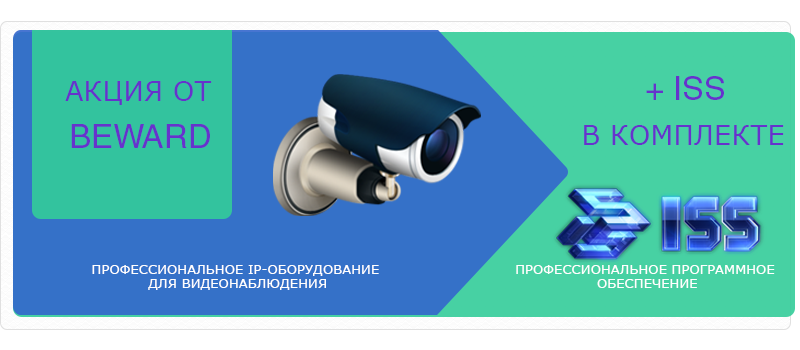
<style>
.page{position:relative;width:800px;height:350px;background:#3571c8}
.page>*{position:absolute;margin:0}
.t1{font:32.7px "Helvetica";color:#6633cc}
.t2{font:27.4px "Verdana";color:#6633cc}
.t3{font:32.9px "Helvetica";color:#6633cc}
.t4{font:13.2px/13.2px "Verdana";color:#ffffff}
</style>
<div class="page">
<p class="t1" style="left:646px;top:76px;width:78px;height:24px">+ ISS</p>
<p class="t2" style="left:65px;top:81px;width:147px;height:24px">АКЦИЯ ОТ</p>
<p class="t3" style="left:71px;top:124px;width:139px;height:24px">BEWARD</p>
<p class="t2" style="left:584px;top:125px;width:200px;height:20px">В КОМПЛЕКТЕ</p>
<p class="t4" style="left:92px;top:265px;width:287px;height:25px;text-align:center">ПРОФЕССИОНАЛЬНОЕ IP-ОБОРУДОВАНИЕ<br> ДЛЯ ВИДЕОНАБЛЮДЕНИЯ</p>
<p class="t4" style="left:516px;top:265px;width:259px;height:23px;text-align:center">ПРОФЕССИОНАЛЬНОЕ ПРОГРАММНОЕ<br> ОБЕСПЕЧЕНИЕ</p>
</div>
